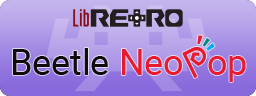
<style>
.page{position:relative;width:256px;height:96px}
.page>*{position:absolute;margin:0}
.t1{font:36px "Roboto-Regular";color:#0e0c0c}
.t2{font:36px "Roboto-Regular";color:#e81a2d}
</style>
<div class="page">
<p class="t1" style="left:13px;top:48px;width:95px;height:27px">Beetle</p>
<p class="t2" style="left:122px;top:49px;width:60px;height:26px">Neo</p>
<p class="t2" style="left:208px;top:56px;width:38px;height:26px">op</p>
</div>
